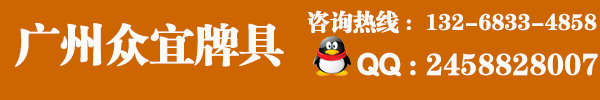
<style>
.page{position:relative;width:600px;height:100px;background:#cd6601}
.page>*{position:absolute;margin:0}
.t1{font:23px "FZCSJW--GB1-0";color:#fcfaf7}
.t2{font:44.2px "FZCSJW--GB1-0";color:#fcfaf7}
.t3{font:30.8px "FZCSJW--GB1-0";color:#fcfaf7}
.t4{font:30.8px "FZY4JW--GB1-0";color:#fcfaf7}
</style>
<div class="page">
<p class="t1" style="left:307px;top:10px;width:290px;height:24px">咨询热线 :  132-6833-4858</p>
<p class="t2" style="left:15px;top:23px;width:269px;height:44px">广州众宜牌具</p>
<p class="t3" style="left:357px;top:52px;width:241px;height:25px"><span class="t4"> QQ </span>: 2458828007</p>
</div>
